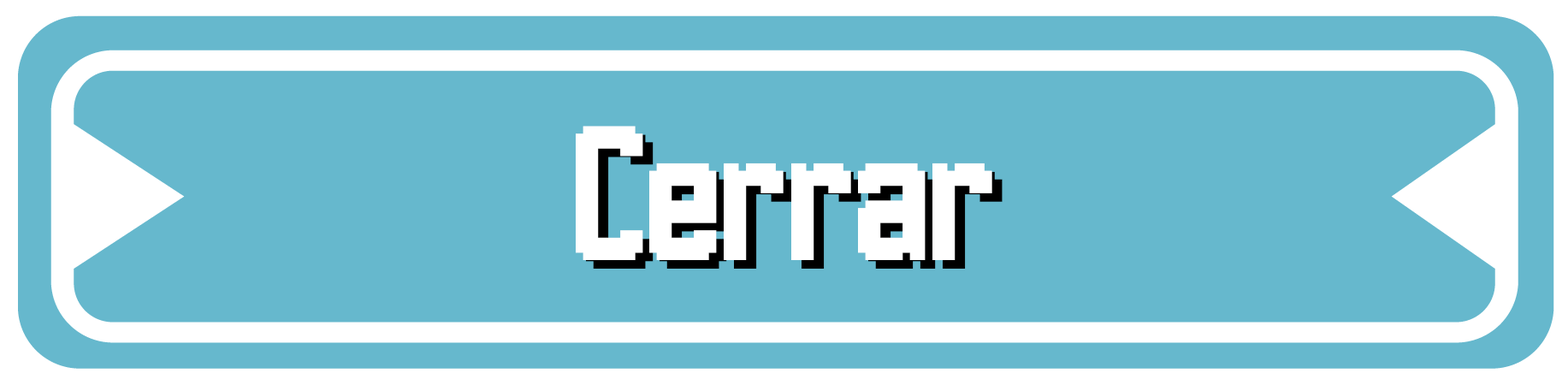
<style>
.page{position:relative;width:1568px;height:385px;background:#66b8cd}
.page>*{position:absolute;margin:0}
.t1{font:171.1px "Hannover-Messe-Sans";color:#ffffff}
</style>
<div class="page">
<p class="t1" style="left:576px;top:126px;width:416px;height:134px">Cerrar</p>
</div>
